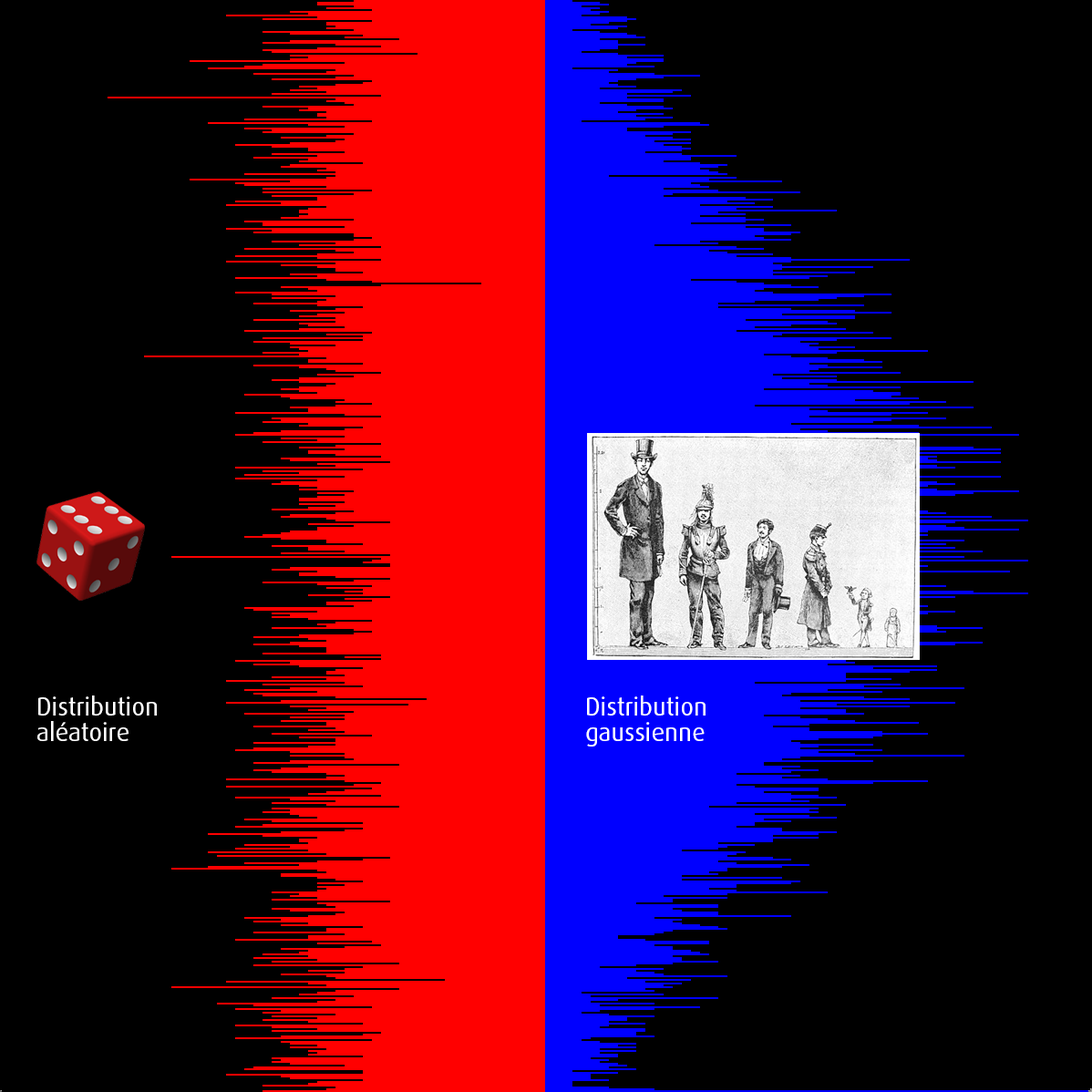
<style>
.page{position:relative;width:1092px;height:1092px;background:#000000}
.page>*{position:absolute;margin:0}
.t1{font:25.5px/25.5px "Dax-Regular";color:#ffffff}
</style>
<div class="page">
<p class="t1" style="left:37px;top:695px;width:120px;height:46px">Distribution<br>aléatoire</p>
<p class="t1" style="left:586px;top:695px;width:120px;height:52px">Distribution<br>gaussienne</p>
</div>
